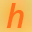
<style>
.page{position:relative;width:32px;height:32px}
.page>*{position:absolute;margin:0}
.t1{font:33.2px "OpenSans-SemiboldItalic";letter-spacing:-0.025em;color:#ff701c}
</style>
<div class="page">
<p class="t1" style="left:6px;top:3px;width:18px;height:25px">h</p>
</div>
